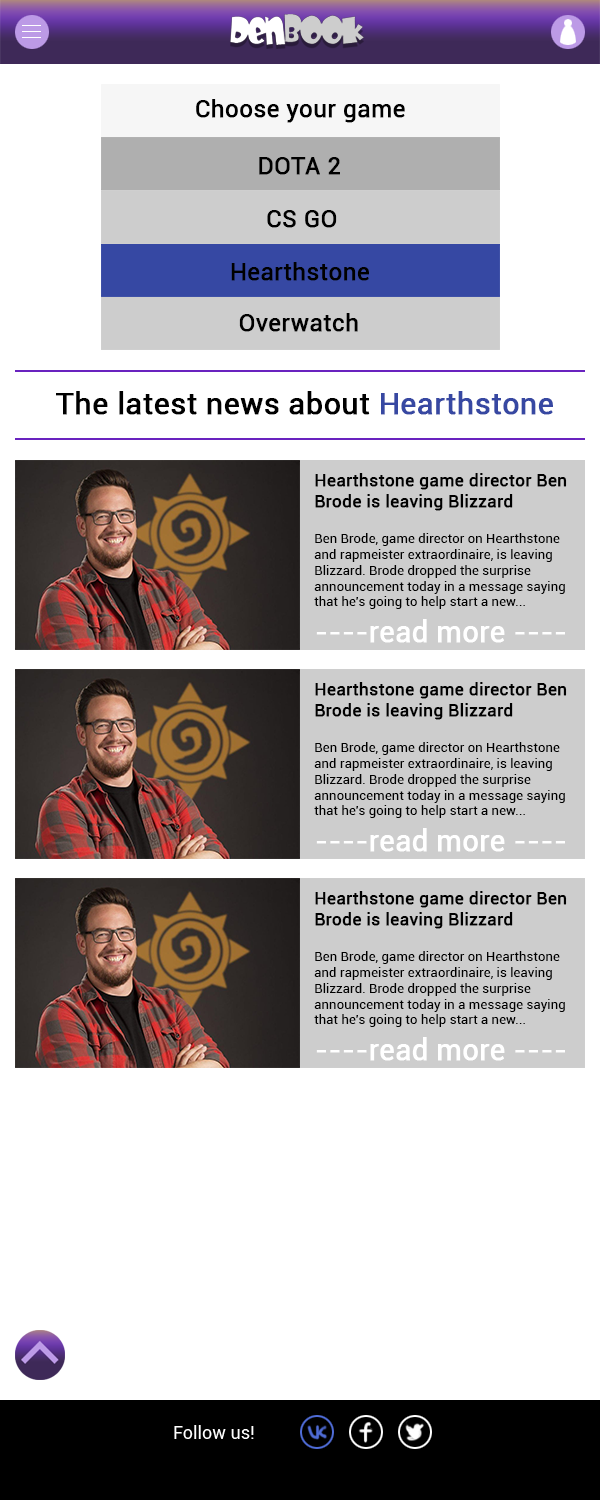
<style>
.page{position:relative;width:600px;height:1500px;background:#ffffff}
.page>*{position:absolute;margin:0}
.t1{font:23.9px "Roboto-Regular";color:#000000;font-weight:bold}
.t2{font:30px "Roboto-Regular";color:#000000;font-weight:bold}
.t3{font:30px "Roboto-Regular";color:#3748a2;font-weight:bold}
.t4{font:17.1px "Roboto-Regular";color:#000000;font-weight:bold}
.t5{font:13.3px "Roboto-Regular";color:#000000}
.t6{font:28.5px "Roboto-Regular";color:#ffffff;font-weight:bold}
</style>
<div class="page">
<p class="t1" style="left:196px;top:99px;width:209px;height:24px">Choose your game</p>
<p class="t1" style="left:259px;top:157px;width:81px;height:18px">DOTA 2</p>
<p class="t1" style="left:267px;top:210px;width:70px;height:18px">CS GO</p>
<p class="t1" style="left:231px;top:262px;width:138px;height:19px">Hearthstone</p>
<p class="t1" style="left:239px;top:313px;width:119px;height:19px">Overwatch</p>
<p class="t2" style="left:56px;top:391px;width:497px;height:24px">The latest news about <span class="t3">Hearthstone</span></p>
<p class="t4" style="left:315px;top:473px;width:252px;height:38px">Hearthstone game director Ben <br>Brode is leaving Blizzard</p>
<p class="t5" style="left:314px;top:533px;width:251px;height:76px">Ben Brode, game director on Hearthstone <br>and rapmeister extraordinaire, is leaving <br>Blizzard. Brode dropped the surprise <br>announcement today in a message saying <br>that he's going to help start a new...</p>
<p class="t6" style="left:316px;top:619px;width:249px;height:24px">----read more ----</p>
<p class="t4" style="left:315px;top:682px;width:252px;height:38px">Hearthstone game director Ben <br>Brode is leaving Blizzard</p>
<p class="t5" style="left:314px;top:742px;width:251px;height:76px">Ben Brode, game director on Hearthstone <br>and rapmeister extraordinaire, is leaving <br>Blizzard. Brode dropped the surprise <br>announcement today in a message saying <br>that he's going to help start a new...</p>
<p class="t6" style="left:316px;top:828px;width:249px;height:24px">----read more ----</p>
<p class="t4" style="left:315px;top:891px;width:252px;height:38px">Hearthstone game director Ben <br>Brode is leaving Blizzard</p>
<p class="t5" style="left:314px;top:951px;width:251px;height:76px">Ben Brode, game director on Hearthstone <br>and rapmeister extraordinaire, is leaving <br>Blizzard. Brode dropped the surprise <br>announcement today in a message saying <br>that he's going to help start a new...</p>
<p class="t6" style="left:316px;top:1037px;width:249px;height:24px">----read more ----</p>
</div>
